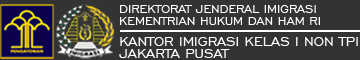
<style>
.page{position:relative;width:360px;height:60px;background:#333333}
.page>*{position:absolute;margin:0}
.t1{font:14px/12px "EngraversGothicBT-Regular";color:#ffffff}
.t2{font:16px/12px "EngraversGothicBT-Regular";color:#ffffff}
</style>
<div class="page">
<p class="t1" style="left:120px;top:5px;width:200px;height:20px">DIREKTORAT JENDERAL IMIGRASI<br>KEMENTRIAN HUKUM DAN HAM RI</p>
<p class="t2" style="left:119px;top:37px;width:239px;height:21px">KANTOR IMIGRASI KELAS I NON TPI<br>JAKARTA PUSAT</p>
</div>
